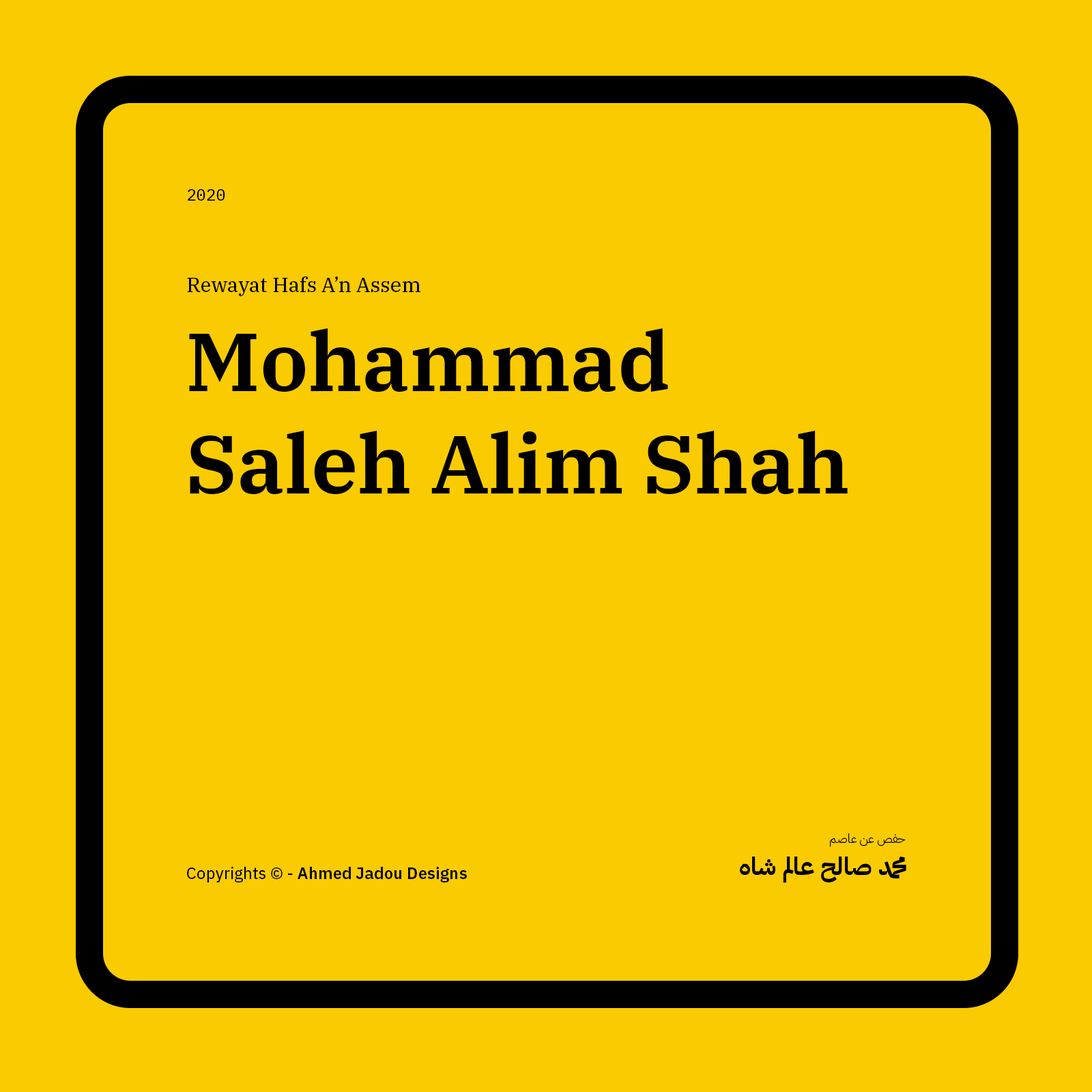
<style>
.page{position:relative;width:1092px;height:1092px;background:#facb00}
.page>*{position:absolute;margin:0}
.t1{font:16.4px "IBMPlexMono-Text";color:#000000}
.t2{font:20.5px "IBMPlexSerif-Text";color:#000000}
.t3{font:81.9px/102.7px "IBMPlexSerif-SemiBold";color:#000000}
.t4{font:12.3px "IBMPlexArabic-Light";color:#000000}
.t5{font:24.6px "IBMPlexArabic-Bold";color:#000000}
.t6{font:16.4px "IBMPlexSans-SemiBold";color:#000000}
.t7{font:16.4px "IBMPlexSans-Text";color:#000000}
</style>
<div class="page">
<p class="t1" style="left:188px;top:189px;width:37px;height:12px">2020</p>
<p class="t2" style="left:187px;top:276px;width:233px;height:20px">Rewayat Hafs A’n Assem</p>
<p class="t3" style="left:189px;top:328px;width:659px;height:166px">Mohammad Saleh Alim Shah</p>
<p class="t4" style="left:830px;top:833px;width:76px;height:14px">حفص عن عاصم</p>
<p class="t5" style="left:740px;top:857px;width:166px;height:26px">محمد صالح عالم شاه</p>
<p class="t6" style="left:187px;top:867px;width:280px;height:15px"><span class="t7">Copyrights © - </span>Ahmed Jadou Designs</p>
</div>
